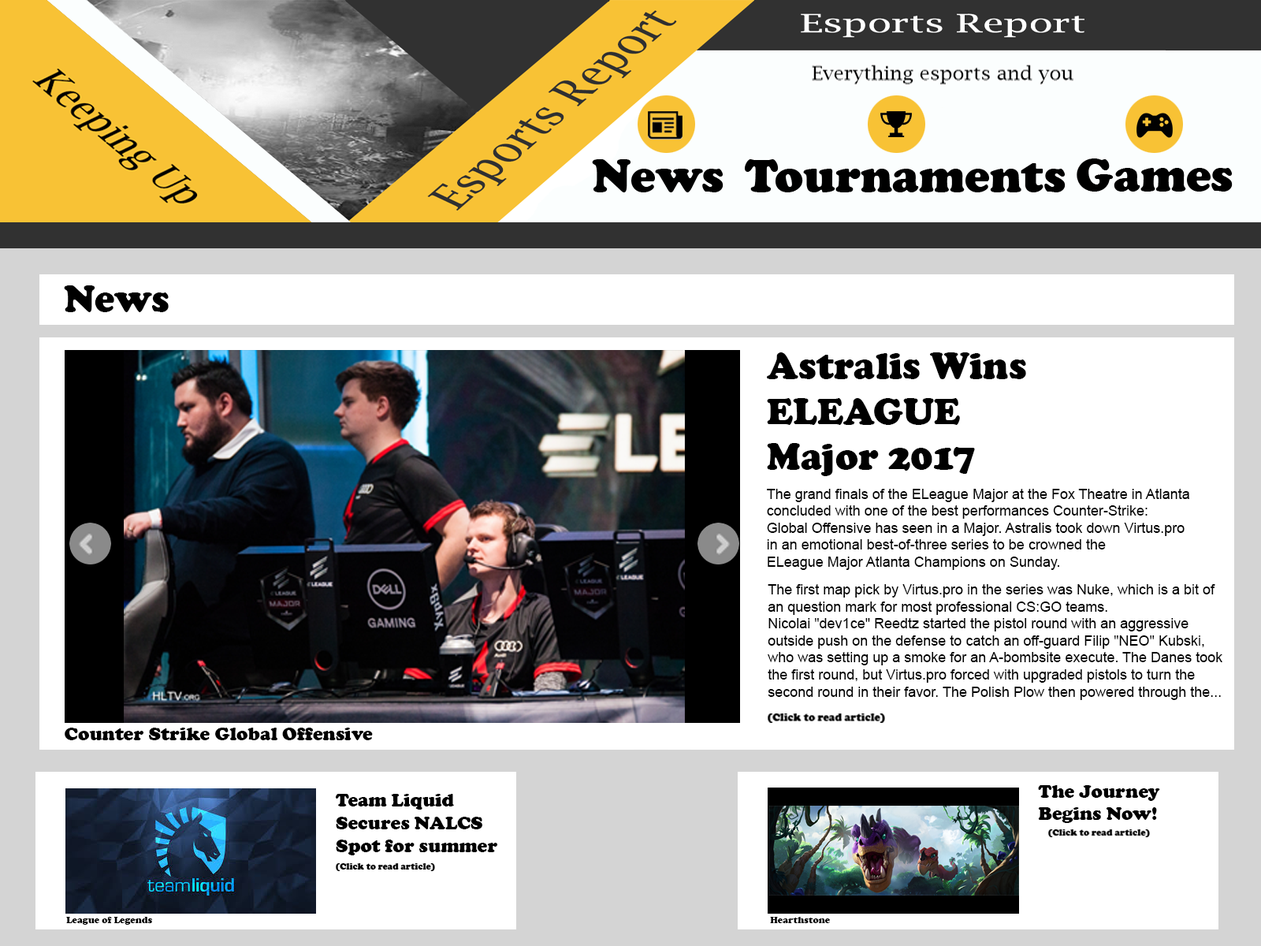
<style>
.page{position:relative;width:1261px;height:946px;background:#ffffff}
.page>*{position:absolute;margin:0}
.t1{font:37.8px "CooperBlack";color:#000000}
.t2{font:14.2px "ArialMT";color:#000000}
.t3{font:18.9px "CooperBlack";color:#000000}
.t4{font:9.5px "CooperBlack";color:#000000}
</style>
<div class="page">
<p class="t1" style="left:64px;top:285px;width:105px;height:27px">News</p>
<p class="t1" style="left:767px;top:352px;width:259px;height:124px">Astralis Wins<br>ELEAGUE<br>Major 2017</p>
<p class="t2" style="left:767px;top:489px;width:422px;height:81px">The grand finals of the ELeague Major at the Fox Theatre in Atlanta <br>concluded with one of the best performances Counter-Strike: <br>Global Offensive has seen in a Major. Astralis took down Virtus.pro <br>in an emotional best-of-three series to be crowned the <br>ELeague Major Atlanta Champions on Sunday.</p>
<p class="t2" style="left:768px;top:584px;width:454px;height:116px">The first map pick by Virtus.pro in the series was Nuke, which is a bit of <br>an question mark for most professional CS:GO teams. <br>Nicolai "dev1ce" Reedtz started the pistol round with an aggressive <br>outside push on the defense to catch an off-guard Filip "NEO" Kubski, <br>who was setting up a smoke for an A-bombsite execute. The Danes took <br>the first round, but Virtus.pro forced with upgraded pistols to turn the<br>second round in their favor. The Polish Plow then powered through the...</p>
<p class="t3" style="left:65px;top:727px;width:308px;height:13px">Counter Strike Global Offensive</p>
<p class="t3" style="left:1038px;top:785px;width:122px;height:38px">The Journey<br>Begins Now!</p>
<p class="t3" style="left:336px;top:794px;width:161px;height:61px">Team Liquid<br>Secures NALCS<br>Spot for summer</p>
<p class="t4" style="left:66px;top:917px;width:86px;height:7px">League of Legends</p>
<p class="t4" style="left:770px;top:917px;width:60px;height:6px">Hearthstone</p>
</div>
